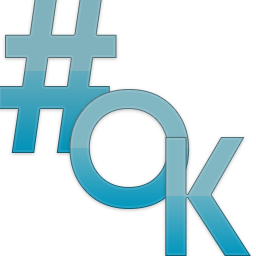
<style>
.page{position:relative;width:256px;height:256px;background:#ffffff}
.page>*{position:absolute;margin:0}
.t1{font:143.3px "Brandish"}
</style>
<div class="page">
<p class="t1" style="left:69px;top:89px;width:121px;height:120px">O</p>
<p class="t1" style="left:165px;top:137px;width:86px;height:119px">K</p>
</div>
